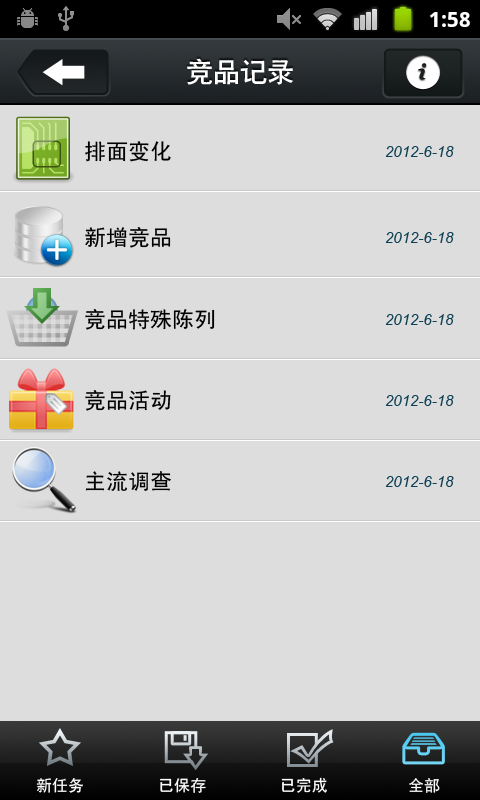
<style>
.page{position:relative;width:480px;height:800px;background:#dddddd}
.page>*{position:absolute;margin:0}
.t1{font:27px "CTCuHeiSJ";color:#ffffff}
.t2{font:22px "SimHei";color:#000000}
.t3{font:15px "Arial-ItalicMT";color:#0e4054}
.t4{font:16px "SimHei";color:#ffffff}
</style>
<div class="page">
<p class="t1" style="left:187px;top:58px;width:106px;height:27px">竞品记录</p>
<p class="t2" style="left:85px;top:141px;width:86px;height:21px">排面变化</p>
<p class="t3" style="left:385px;top:146px;width:69px;height:11px">2012-6-18</p>
<p class="t2" style="left:85px;top:227px;width:86px;height:21px">新增竞品</p>
<p class="t3" style="left:385px;top:232px;width:69px;height:11px">2012-6-18</p>
<p class="t2" style="left:85px;top:309px;width:130px;height:21px">竞品特殊陈列</p>
<p class="t3" style="left:385px;top:314px;width:69px;height:11px">2012-6-18</p>
<p class="t2" style="left:85px;top:390px;width:86px;height:21px">竞品活动</p>
<p class="t3" style="left:385px;top:395px;width:69px;height:11px">2012-6-18</p>
<p class="t2" style="left:85px;top:471px;width:86px;height:20px">主流调查</p>
<p class="t3" style="left:385px;top:476px;width:69px;height:11px">2012-6-18</p>
<p class="t4" style="left:36px;top:778px;width:47px;height:15px">新任务</p>
<p class="t4" style="left:160px;top:778px;width:46px;height:15px">已保存</p>
<p class="t4" style="left:281px;top:777px;width:46px;height:16px">已完成</p>
<p class="t4" style="left:409px;top:778px;width:31px;height:15px">全部</p>
</div>
